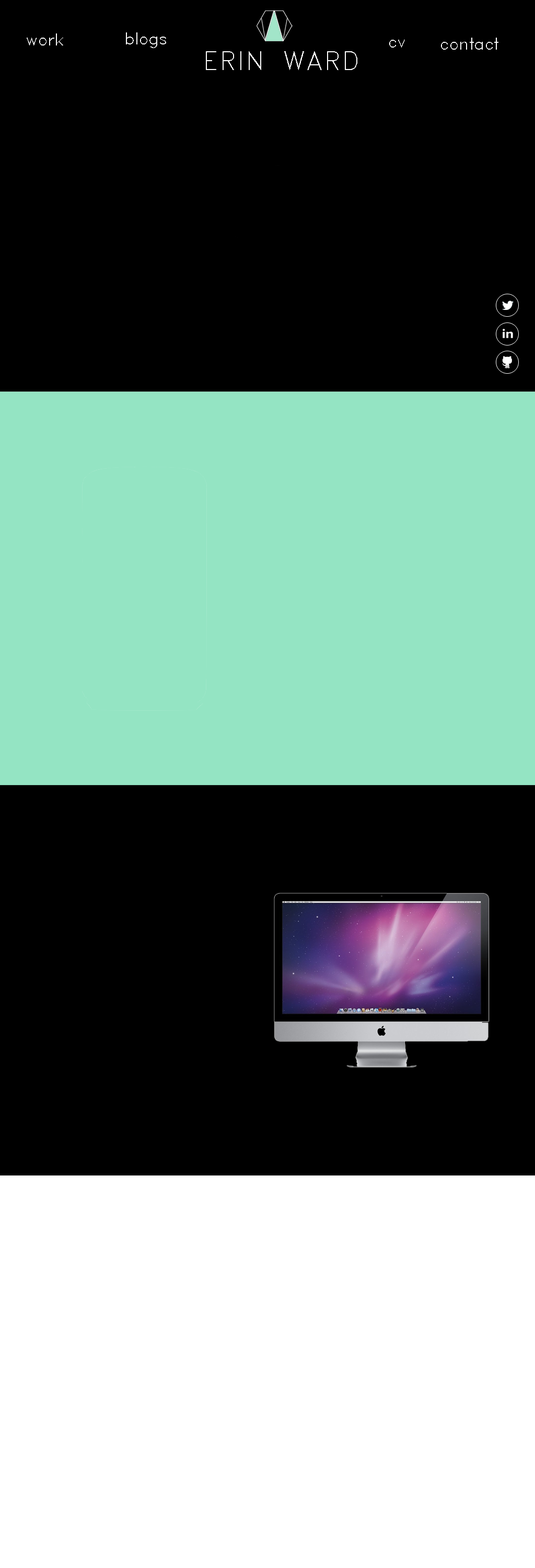
<style>
.page{position:relative;width:535px;height:1568px;background:#000000}
.page>*{position:absolute;margin:0}
.t1{font:15.7px "RomanD";letter-spacing:-0.05em;color:#ffffff}
.t2{font:25.1px "RomanD";color:#ffffff}
</style>
<div class="page">
<p class="t1" style="left:27px;top:33px;width:36px;height:12px">work</p>
<p class="t1" style="left:126px;top:32px;width:40px;height:16px">blogs</p>
<p class="t1" style="left:389px;top:40px;width:16px;height:8px">cv</p>
<p class="t1" style="left:441px;top:38px;width:58px;height:12px">contact</p>
<p class="t2" style="left:206px;top:51px;width:152px;height:19px">ERIN WARD</p>
</div>
